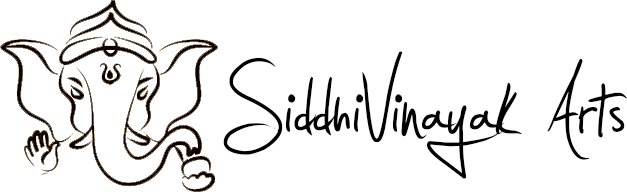
<style>
.page{position:relative;width:627px;height:192px;background:#ffffff}
.page>*{position:absolute;margin:0}
.t1{font:176px "Jellyka---Estrya's-Handwriting";color:#000000}
</style>
<div class="page">
<p class="t1" style="left:223px;top:51px;width:404px;height:128px">SiddhiVinayak Arts</p>
</div>
